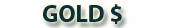
<style>
.page{position:relative;width:175px;height:28px;background:#ffffff}
.page>*{position:absolute;margin:0}
.t1{font:24px "MyriadPro-Bold";color:#072e43}
</style>
<div class="page">
<p class="t1" style="left:43px;top:4px;width:79px;height:20px">GOLD $</p>
</div>
